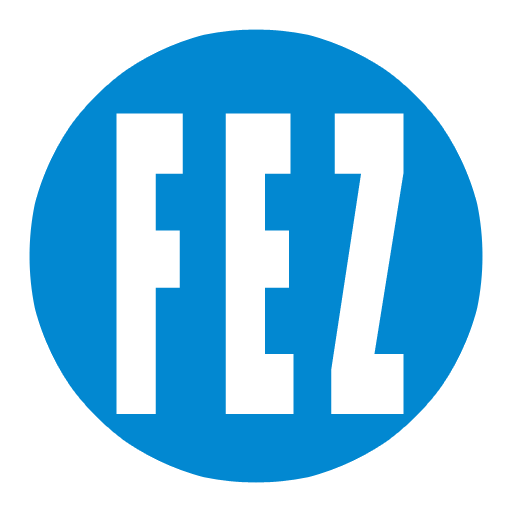
<style>
.page{position:relative;width:512px;height:512px;background:#ffffff}
.page>*{position:absolute;margin:0}
.t1{font:380px "Impact";color:#ffffff;scale:0.5 1}
</style>
<div class="page">
<p class="t1" style="left:116px;top:113px;width:288px;height:301px">F E Z</p>
</div>
